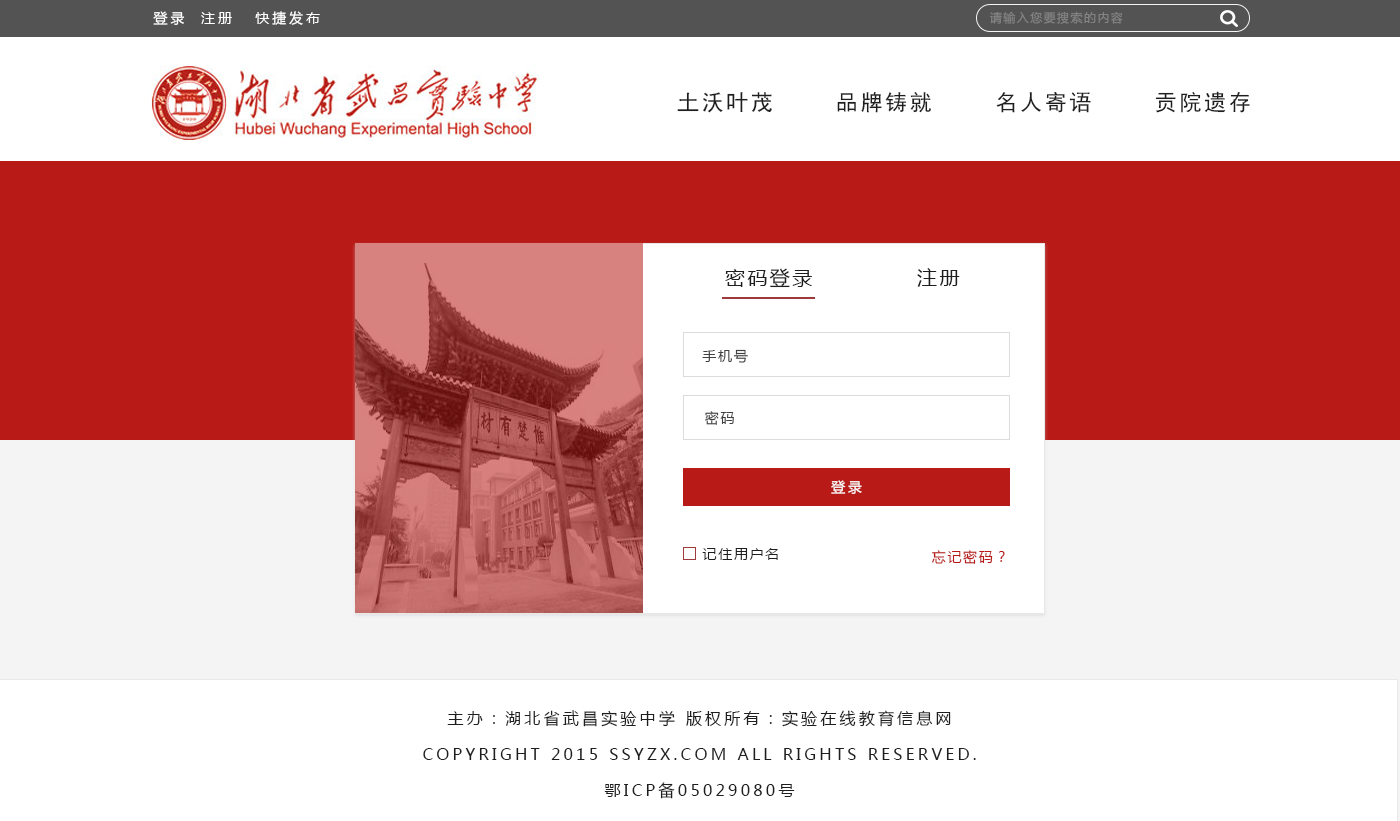
<style>
.page{position:relative;width:1400px;height:821px;background:#ffffff}
.page>*{position:absolute;margin:0}
.t1{font:14px "MicrosoftYaHei";letter-spacing:0.2em;color:#ffffff}
.t2{font:12px "MicrosoftYaHei";letter-spacing:0.12em;color:#848484}
.t3{font:22px "SimHei";letter-spacing:0.12em;color:#1e1e1e}
.t4{font:20px "MicrosoftYaHei";letter-spacing:0.12em;color:#1e1e1e}
.t5{font:14px "MicrosoftYaHei";letter-spacing:0.12em;color:#414141}
.t6{font:14px "MicrosoftYaHei";letter-spacing:0.2em;color:#fefefe}
.t7{font:14px "MicrosoftYaHei";letter-spacing:0.12em;color:#1e1e1e}
.t8{font:14px "MicrosoftYaHei";letter-spacing:0.12em;color:#b81b17}
.t9{font:16px/36px "MicrosoftYaHei";letter-spacing:0.2em;color:#1e1e1e}
</style>
<div class="page">
<p class="t1" style="left:153px;top:11px;width:167px;height:14px">登录  注册   快捷发布</p>
<p class="t2" style="left:989px;top:11px;width:134px;height:13px">请输入您要搜索的内容</p>
<p class="t3" style="left:677px;top:92px;width:95px;height:21px">土沃叶茂</p>
<p class="t3" style="left:837px;top:92px;width:94px;height:21px">品牌铸就</p>
<p class="t3" style="left:996px;top:92px;width:95px;height:21px">名人寄语</p>
<p class="t3" style="left:1155px;top:91px;width:95px;height:22px">贡院遗存</p>
<p class="t4" style="left:725px;top:268px;width:87px;height:20px">密码登录</p>
<p class="t4" style="left:917px;top:268px;width:43px;height:19px">注册</p>
<p class="t5" style="left:702px;top:349px;width:46px;height:14px">手机号</p>
<p class="t5" style="left:705px;top:411px;width:29px;height:14px">密码</p>
<p class="t6" style="left:831px;top:480px;width:31px;height:14px">登录</p>
<p class="t7" style="left:702px;top:548px;width:76px;height:12px">记住用户名</p>
<p class="t8" style="left:932px;top:550px;width:73px;height:14px">忘记密码？</p>
<p class="t9" style="left:423px;top:710px;width:553px;height:89px;text-align:center">主办：湖北省武昌实验中学 版权所有：实验在线教育信息网<br>COPYRIGHT 2015 SSYZX.COM ALL RIGHTS RESERVED.<br>鄂ICP备05029080号</p>
</div>
